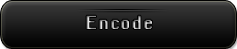
<style>
.page{position:relative;width:237px;height:49px}
.page>*{position:absolute;margin:0}
.t1{font:17px "System";letter-spacing:0.05em}
</style>
<div class="page">
<p class="t1" style="left:86px;top:15px;width:66px;height:14px">Encode</p>
</div>
